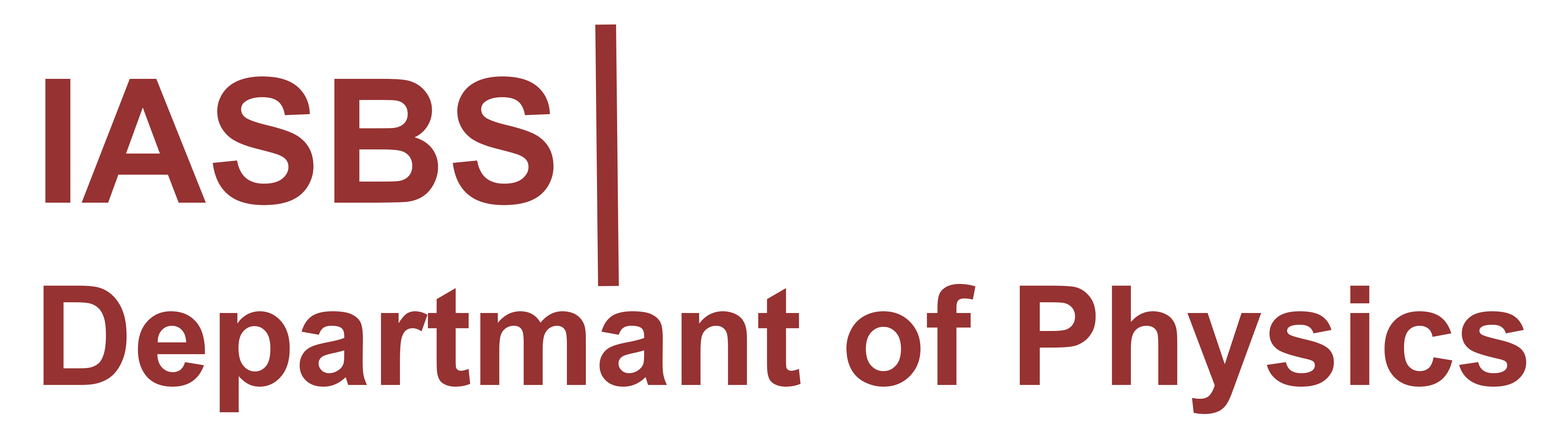
<style>
.page{position:relative;width:1568px;height:442px;background:#ffffff}
.page>*{position:absolute;margin:0}
.t1{font:173px "Arial-BoldMT";color:#963232}
.t2{font:138.4px "Arial-BoldMT";color:#963232}
</style>
<div class="page">
<p class="t1" style="left:45px;top:76px;width:509px;height:129px">IASBS</p>
<p class="t2" style="left:43px;top:284px;width:1483px;height:130px">Departmant of Physics</p>
</div>
